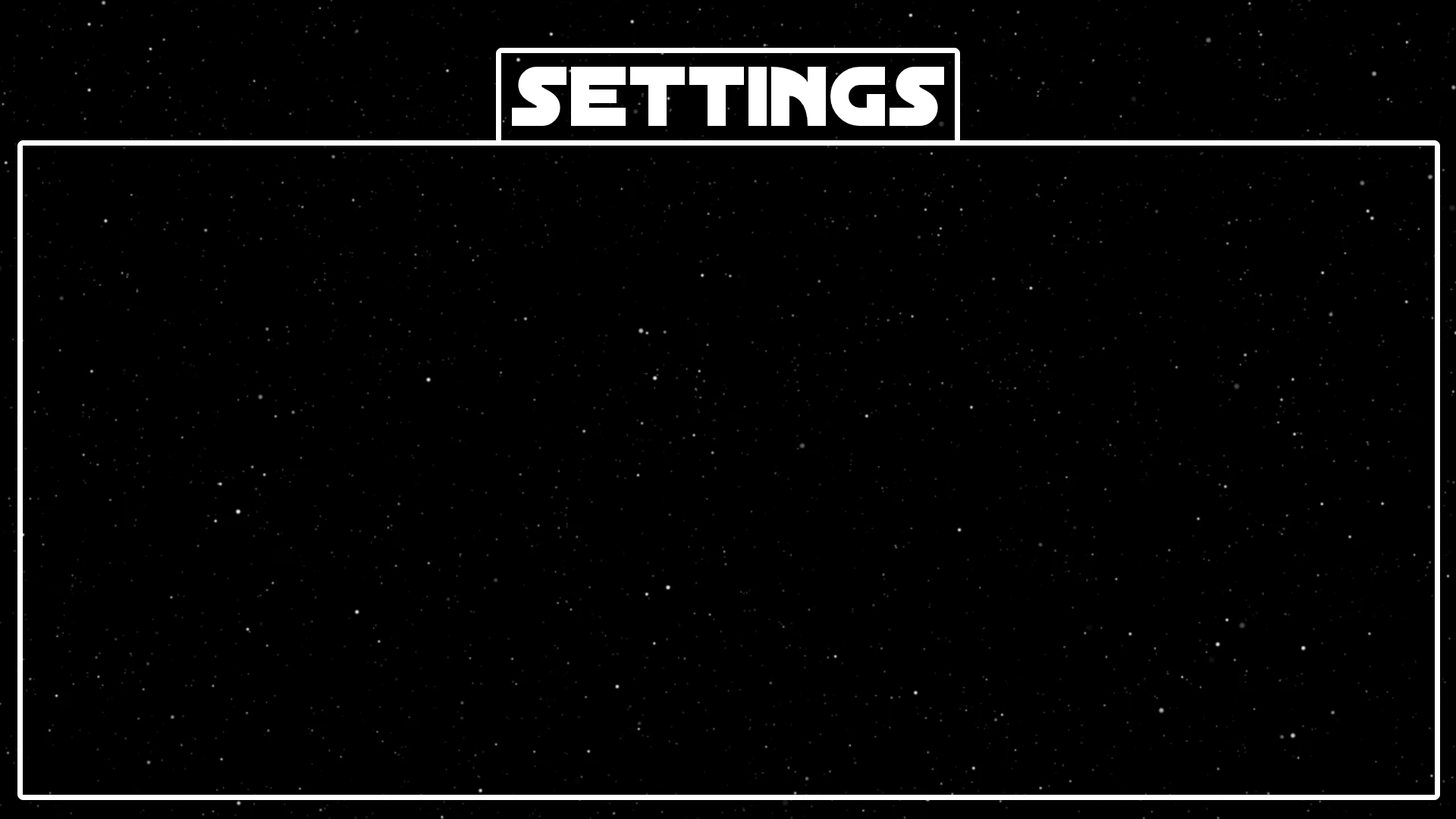
<style>
.page{position:relative;width:1456px;height:819px;background:#000000}
.page>*{position:absolute;margin:0}
.t1{font:91px "DistantGalaxy";color:#ffffff}
</style>
<div class="page">
<p class="t1" style="left:512px;top:67px;width:432px;height:59px">settings</p>
</div>
